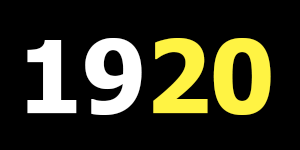
<style>
.page{position:relative;width:300px;height:150px;background:#000000}
.page>*{position:absolute;margin:0}
.t1{font:75.5px "Tahoma-Bold";color:#ffffff;text-transform:uppercase}
.t2{font:75.5px "Tahoma-Bold";color:#fff343;text-transform:uppercase}
</style>
<div class="page">
<p class="t1" style="left:27px;top:38px;width:244px;height:77px">19<span class="t2">20</span></p>
</div>
